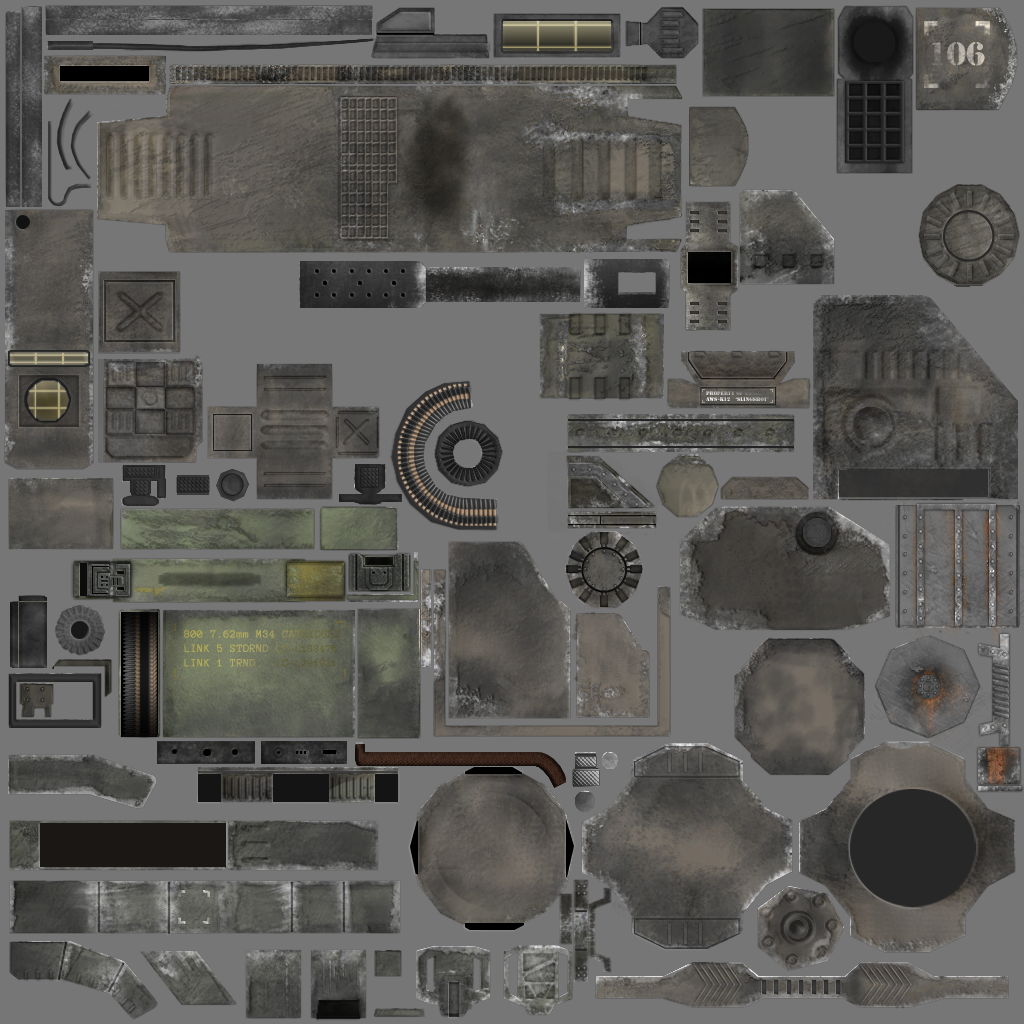
<style>
.page{position:relative;width:1024px;height:1024px;background:#767676}
.page>*{position:absolute;margin:0}
.t1{font:5px "StencilStd"}
.t2{font:12px "AnonymousPro-Bold";color:#ada55a}
.t3{font:11px "AnonymousPro-Bold";color:#ada55a}
</style>
<div class="page">
<p class="t1" style="left:706px;top:391px;width:63px;height:10px">Property of US GOVT<br>AWS-K12   ‘SLINGSHOT’</p>
<p class="t2" style="left:184px;top:630px;width:156px;height:37px">800 7.62mm M34 CATRIDGES<br>LINK 5 STDRND LC-<span class="t3">L183476 <br></span>LINK 1 TRND   LC-<span class="t3">L291931</span></p>
</div>
